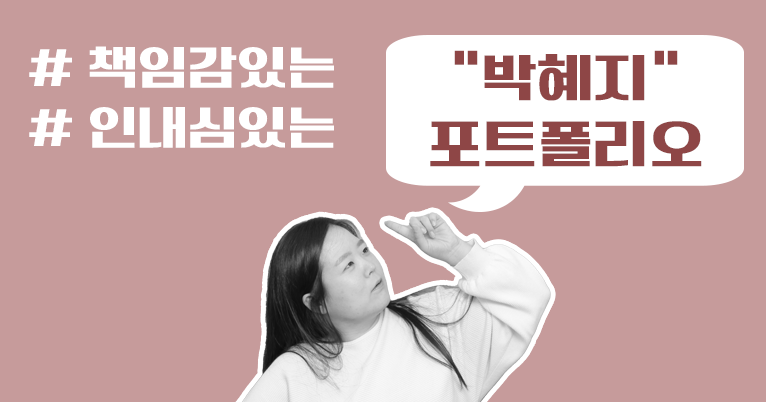
<style>
.page{position:relative;width:766px;height:402px;background:#c69b9b}
.page>*{position:absolute;margin:0}
.t1{font:49.8px "TTYukjundabangR";color:#ffffff}
.t2{font:55.5px "TTYukjundabangR";color:#8e4646}
</style>
<div class="page">
<p class="t1" style="left:29px;top:46px;width:305px;height:102px"># 책임감있는<br># 인내심있는</p>
<p class="t2" style="left:430px;top:50px;width:272px;height:117px;text-align:center">“박혜지”<br>포트폴리오</p>
</div>
